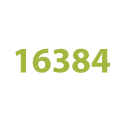
<style>
.page{position:relative;width:120px;height:120px;background:#ffffff}
.page>*{position:absolute;margin:0}
.t1{font:36px "MyriadPro-Bold";letter-spacing:-0.01em;color:#a1b73f}
</style>
<div class="page">
<p class="t1" style="left:15px;top:48px;width:95px;height:25px">16384</p>
</div>
